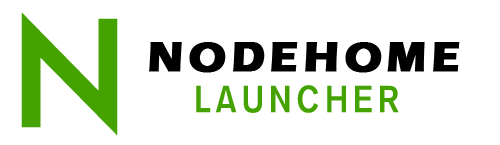
<style>
.page{position:relative;width:500px;height:145px;background:#ffffff}
.page>*{position:absolute;margin:0}
.t1{font:167.1px "TwCenMT-Regular";letter-spacing:0.1em;color:#44a300;font-weight:bold}
.t2{font:43px "ErasITC-Bold";letter-spacing:0.1em;color:#000000;font-weight:bold}
.t3{font:34.3px "Yj-TEUNTEUN--Bold";letter-spacing:0.1em;color:#44a300}
</style>
<div class="page">
<p class="t1" style="left:21px;top:12px;width:97px;height:124px">N</p>
<p class="t2" style="left:149px;top:42px;width:311px;height:31px">NODEHOME</p>
<p class="t3" style="left:196px;top:85px;width:203px;height:28px">LAUNCHER</p>
</div>
